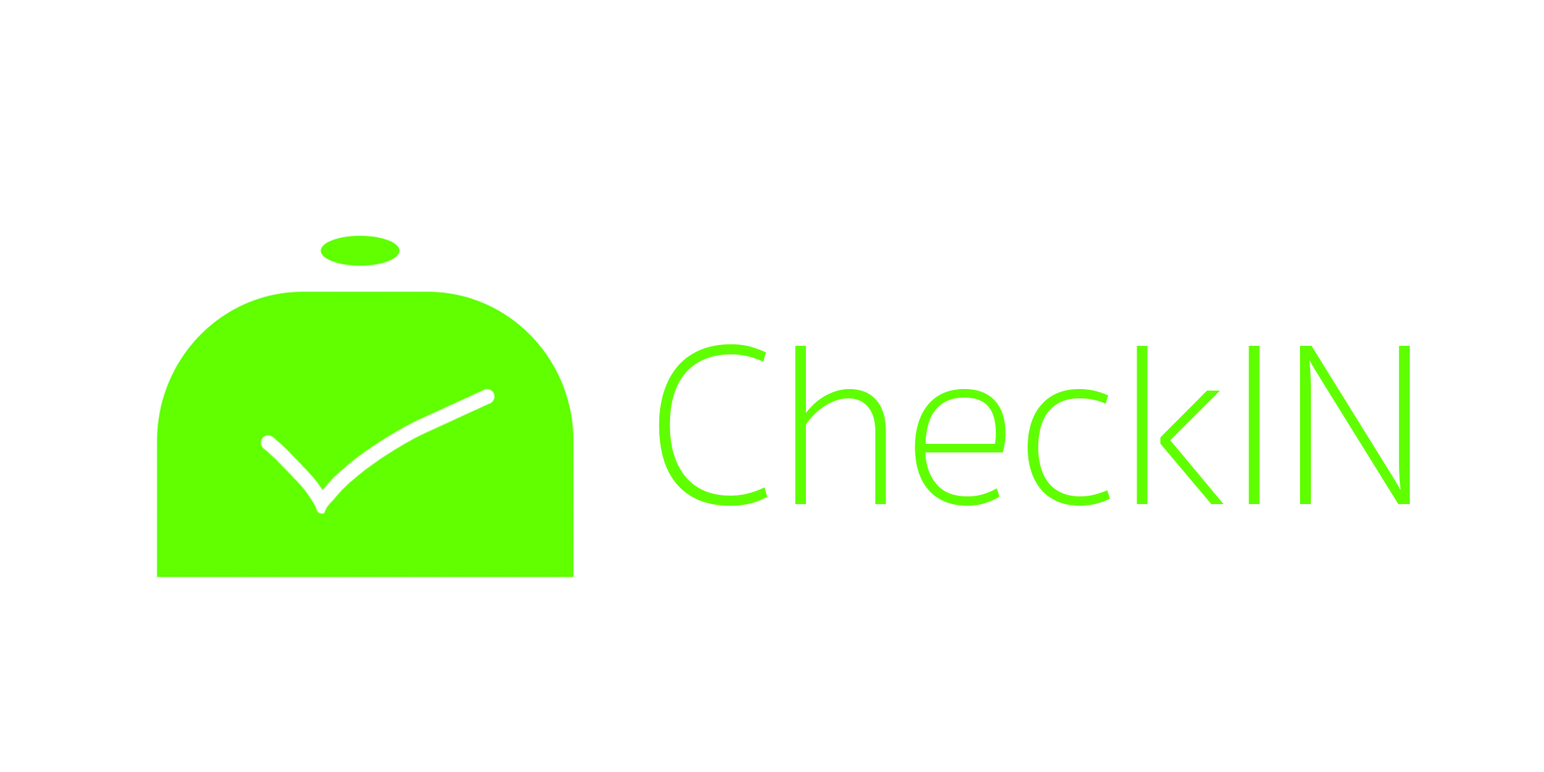
<style>
.page{position:relative;width:1544px;height:772px;background:#ffffff}
.page>*{position:absolute;margin:0}
.t1{font:234.5px "SukhumvitSet-Thin";color:#5fff00}
</style>
<div class="page">
<p class="t1" style="left:659px;top:344px;width:752px;height:162px">CheckIN</p>
</div>
